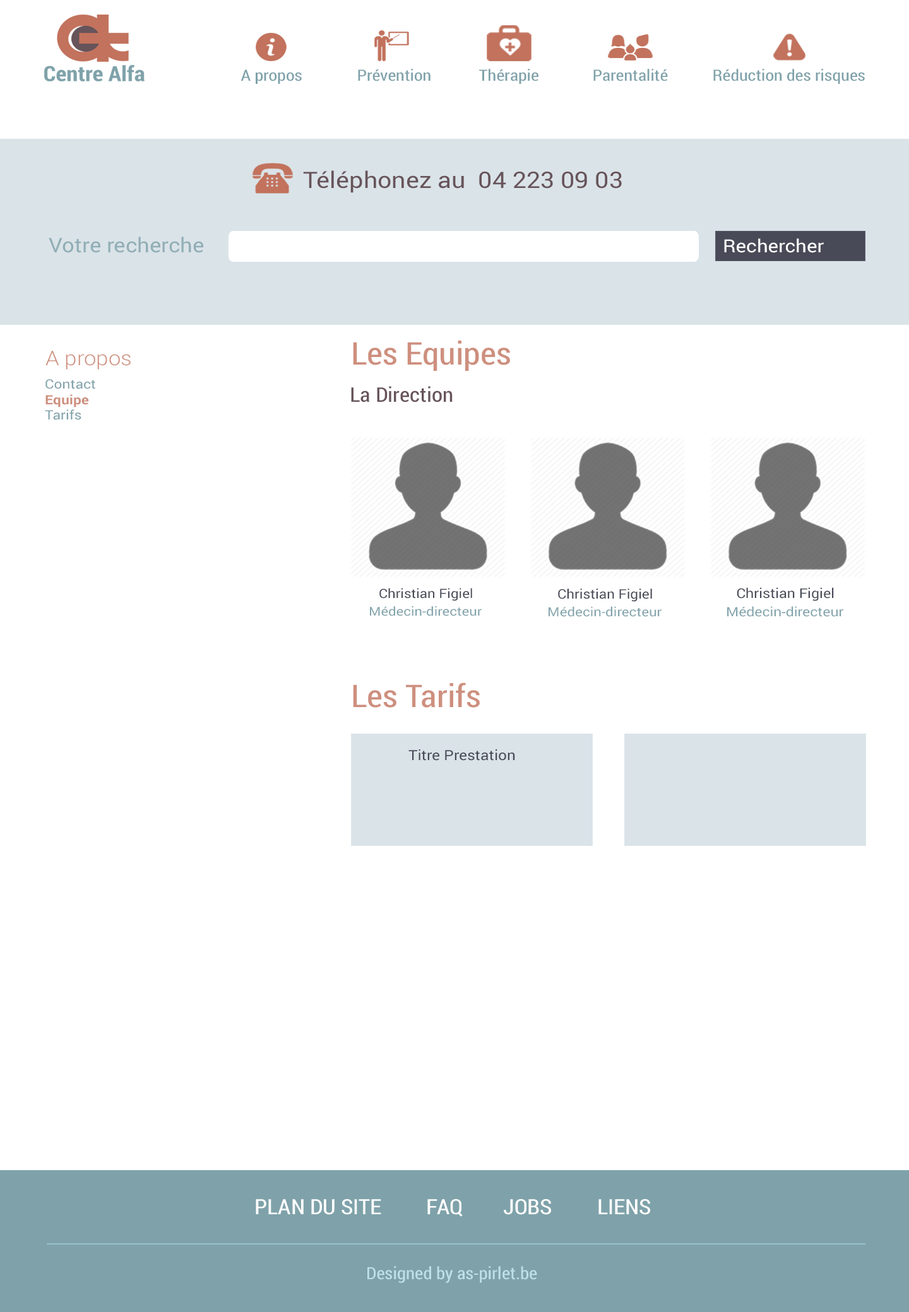
<style>
.page{position:relative;width:909px;height:1312px;background:#ffffff}
.page>*{position:absolute;margin:0}
.t1{font:15.7px "RobotoCondensed-Regular";color:#7fa2aa;scale:1.14 1}
.t2{font:22.7px "Roboto-Regular";color:#67545a;scale:1.1 1}
.t3{font:20.2px "Roboto-Regular";color:#90aeb5;scale:1.09 1}
.t4{font:17.9px "Roboto-Regular";color:#ffffff;scale:1.1 1}
.t5{font:31.4px "RobotoCondensed-Regular";color:#ce8f7e;scale:1.1 1}
.t6{font:20.2px "Roboto-Light";color:#ce8f7e;scale:1.09 1}
.t7{font:12.9px "Roboto-Regular";color:#7fa2aa;scale:1.12 1}
.t8{font:12.9px "Roboto-Bold";color:#ce8f7e;scale:1.12 1}
.t9{font:20.2px "RobotoCondensed-Regular";color:#67545a;scale:1.1 1}
.t10{font:12.8px "Roboto-Regular";color:#484a57;scale:1.09 1}
.t11{font:13.1px "Roboto-Regular";color:#484a57;scale:1.08 1}
.t12{font:13.4px "Roboto-Regular";color:#484a57;scale:1.09 1}
.t13{font:12.3px "Roboto-Regular";color:#84a6ad;scale:1.13 1}
.t14{font:12.5px "Roboto-Regular";color:#84a6ad;scale:1.12 1}
.t15{font:12.8px "Roboto-Regular";color:#84a6ad;scale:1.13 1}
.t16{font:14px "Roboto-Regular";color:#484a57;scale:1.1 1}
.t17{font:21px "RobotoCondensed-Regular";color:#ffffff;text-transform:uppercase;scale:1.09 1}
.t18{font:16.8px "RobotoCondensed-Regular";color:#bfe0e8;scale:1.09 1}
</style>
<div class="page">
<p class="t1" style="left:240px;top:69px;width:62px;height:15px">A propos</p>
<p class="t1" style="left:358px;top:69px;width:72px;height:12px">Prévention</p>
<p class="t1" style="left:479px;top:69px;width:59px;height:15px">Thérapie</p>
<p class="t1" style="left:593px;top:69px;width:75px;height:12px">Parentalité</p>
<p class="t1" style="left:713px;top:69px;width:151px;height:15px">Réduction des risques</p>
<p class="t2" style="left:303px;top:170px;width:318px;height:23px">Téléphonez au  04 223 09 03</p>
<p class="t3" style="left:49px;top:237px;width:154px;height:16px">Votre recherche</p>
<p class="t4" style="left:724px;top:239px;width:99px;height:14px">Rechercher</p>
<p class="t5" style="left:353px;top:341px;width:157px;height:30px">Les Equipes</p>
<p class="t6" style="left:45px;top:351px;width:86px;height:19px">A propos</p>
<p class="t7" style="left:45px;top:379px;width:50px;height:41px">Contact<br><span class="t8">Equipe<br></span>Tarifs</p>
<p class="t9" style="left:351px;top:386px;width:101px;height:17px">La Direction</p>
<p class="t10" style="left:379px;top:588px;width:93px;height:13px">Christian Figiel</p>
<p class="t11" style="left:558px;top:589px;width:94px;height:13px">Christian Figiel</p>
<p class="t12" style="left:736px;top:587px;width:98px;height:14px">Christian Figiel</p>
<p class="t13" style="left:370px;top:606px;width:111px;height:10px">Médecin-directeur</p>
<p class="t14" style="left:548px;top:606px;width:113px;height:11px">Médecin-directeur</p>
<p class="t15" style="left:727px;top:606px;width:117px;height:11px">Médecin-directeur</p>
<p class="t5" style="left:353px;top:683px;width:127px;height:25px">Les Tarifs</p>
<p class="t16" style="left:408px;top:750px;width:107px;height:11px">Titre Prestation</p>
<p class="t17" style="left:256px;top:1199px;width:394px;height:18px">Plan du site         Faq        Jobs         Liens</p>
<p class="t18" style="left:367px;top:1266px;width:170px;height:17px">Designed by as-pirlet.be</p>
</div>
